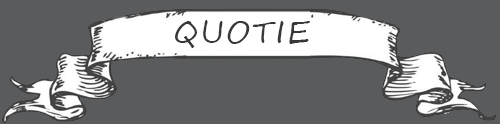
<style>
.page{position:relative;width:500px;height:124px;background:#595b5d}
.page>*{position:absolute;margin:0}
.t1{font:30px "SegoeScript";letter-spacing:0.075em;color:#393737;text-transform:uppercase}
</style>
<div class="page">
<p class="t1" style="left:175px;top:20px;width:135px;height:28px">QUOTIE</p>
</div>
